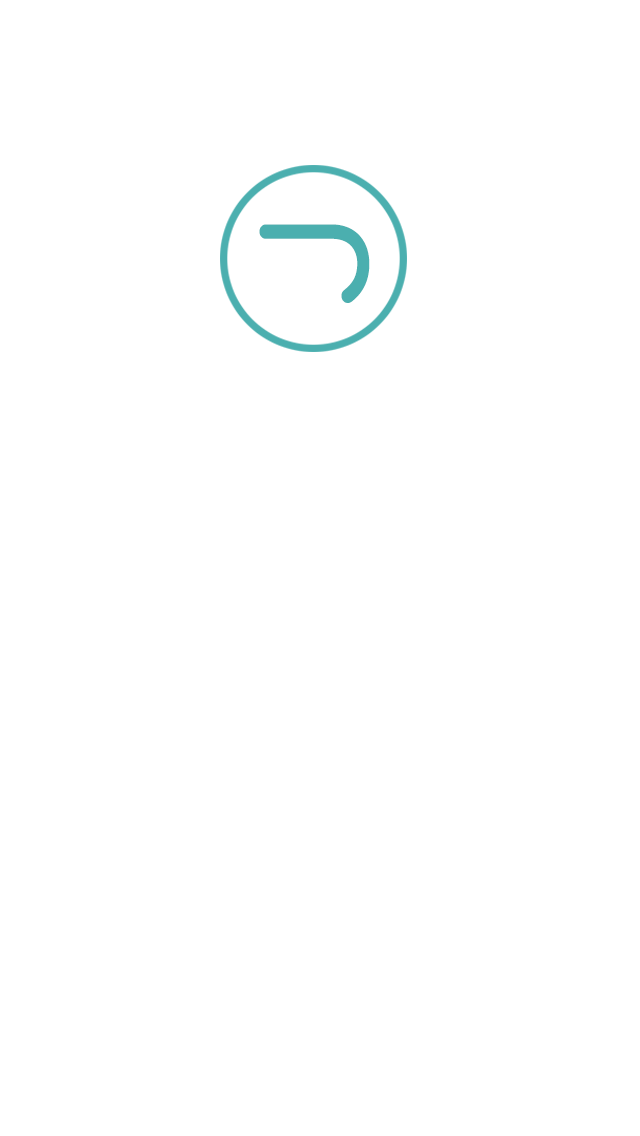
<style>
.page{position:relative;width:640px;height:1136px;background:#ffffff}
.page>*{position:absolute;margin:0}
.t1{font:146.7px "GothamRounded-Light";letter-spacing:0.025em;color:#4bafaf;font-weight:bold;scale:1.21 1}
</style>
<div class="page">
<p class="t1" style="left:259px;top:224px;width:111px;height:79px;rotate:-90deg">J</p>
</div>
